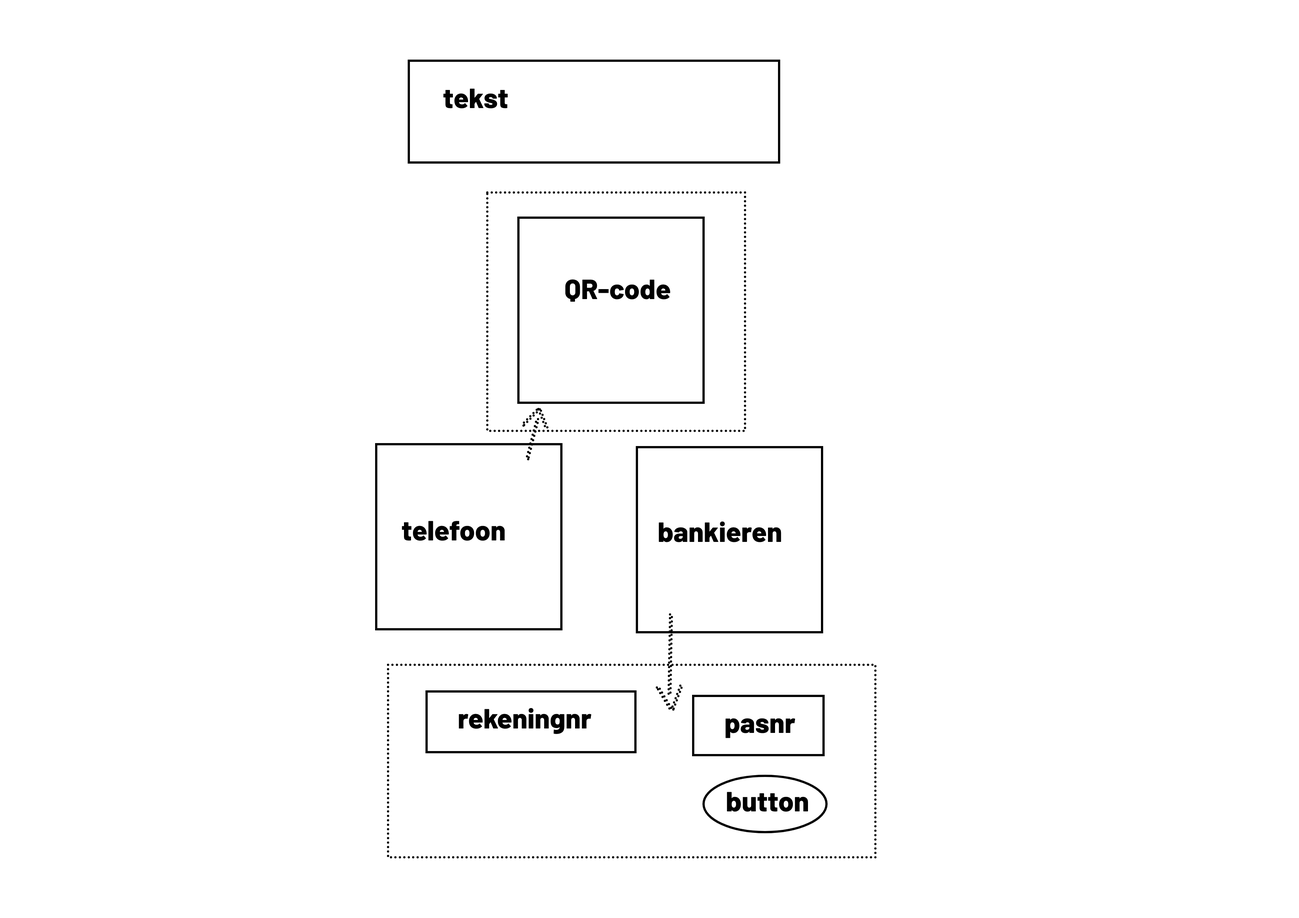
<style>
.page{position:relative;width:1299px;height:918px;background:#ffffff}
.page>*{position:absolute;margin:0}
.t1{font:27.8px "Barlow-ExtraBold";color:#000000}
</style>
<div class="page">
<p class="t1" style="left:443px;top:88px;width:65px;height:20px">tekst</p>
<p class="t1" style="left:565px;top:279px;width:105px;height:23px">QR-code</p>
<p class="t1" style="left:402px;top:521px;width:103px;height:20px">telefoon</p>
<p class="t1" style="left:659px;top:521px;width:122px;height:21px">bankieren</p>
<p class="t1" style="left:459px;top:708px;width:132px;height:26px">rekeningnr</p>
<p class="t1" style="left:725px;top:718px;width:70px;height:20px">pasnr</p>
<p class="t1" style="left:727px;top:792px;width:81px;height:20px">button</p>
</div>
